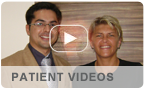
<style>
.page{position:relative;width:145px;height:89px}
.page>*{position:absolute;margin:0}
.t1{font:11px "Arial-BoldMT";letter-spacing:0.04em;color:#606263;text-transform:uppercase;font-weight:bold}
</style>
<div class="page">
<p class="t1" style="left:12px;top:72px;width:102px;height:9px">Patient Videos</p>
</div>
